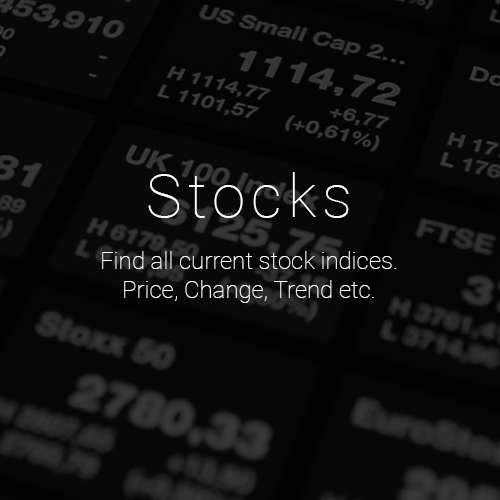
<style>
.page{position:relative;width:500px;height:500px}
.page>*{position:absolute;margin:0}
.t1{font:60px "Roboto-Thin";letter-spacing:0.1em;color:#ffffff}
.t2{font:24px "Roboto-Thin";color:#ffffff}
</style>
<div class="page">
<p class="t1" style="left:148px;top:172px;width:201px;height:46px">Stocks</p>
<p class="t2" style="left:102px;top:251px;width:295px;height:52px;text-align:center">Find all current stock indices.<br>Price, Change, Trend etc.</p>
</div>
